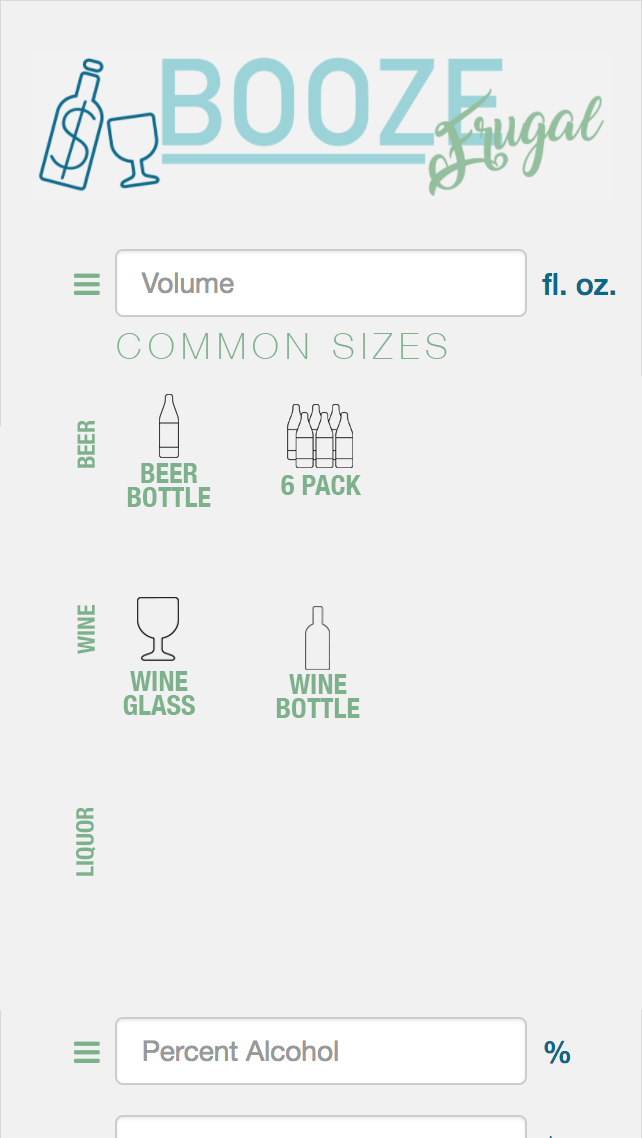
<style>
.page{position:relative;width:642px;height:1138px;background:#f1f1f1}
.page>*{position:absolute;margin:0}
.t1{font:36px "HelveticaNeue-Thin";letter-spacing:0.175em;color:#7cb18c}
.t2{font:12px "HelveticaNeue-CondensedBold";color:#7cb18c}
.t3{font:28px/24px "HelveticaNeue-CondensedBold";color:#7cb18c}
.t4{font:28px "HelveticaNeue-CondensedBold";color:#7cb18c}
</style>
<div class="page">
<p class="t1" style="left:117px;top:333px;width:330px;height:26px">COMMON SIZES</p>
<p class="t2" style="left:77px;top:420px;width:18px;height:48px;rotate:-90deg">BEER</p>
<p class="t3" style="left:127px;top:463px;width:84px;height:44px;text-align:center">BEER<br>BOTTLE</p>
<p class="t4" style="left:281px;top:475px;width:81px;height:20px">6 PACK</p>
<p class="t2" style="left:77px;top:605px;width:18px;height:49px;rotate:-90deg">WINE</p>
<p class="t3" style="left:123px;top:671px;width:72px;height:44px;text-align:center">WINE<br>GLASS</p>
<p class="t3" style="left:276px;top:674px;width:84px;height:44px;text-align:center">WINE<br>BOTTLE</p>
<p class="t2" style="left:76px;top:807px;width:20px;height:69px;rotate:-90deg">LIQUOR</p>
</div>
